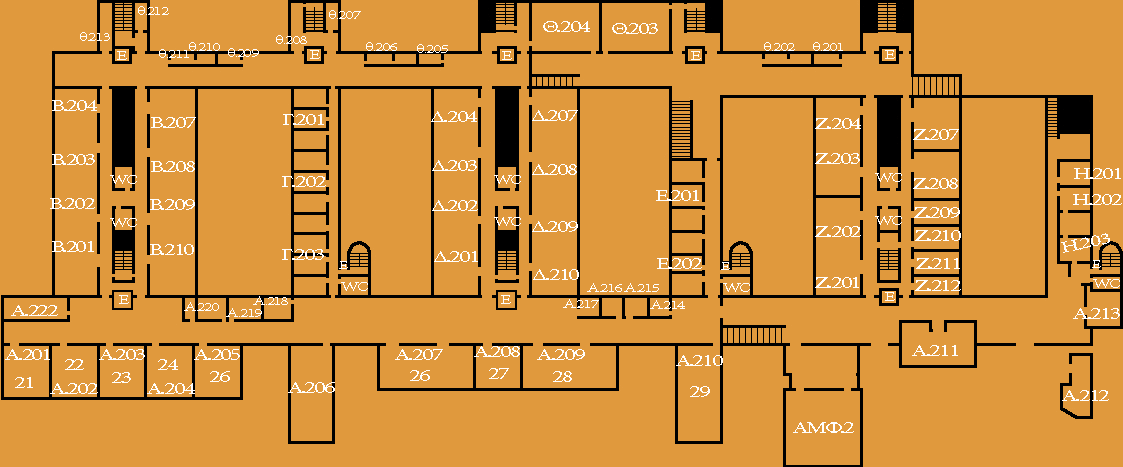
<style>
.page{position:relative;width:1123px;height:467px;background:#e0993d}
.page>*{position:absolute;margin:0}
.t1{font:12.9px "MinionPro-Regular";letter-spacing:-0.08em;color:#ffffff;scale:1.45 1}
.t2{font:16.6px "MinionPro-Regular";letter-spacing:-0.08em;color:#ffffff;scale:1.45 1}
.t3{font:11px "MinionPro-Regular";letter-spacing:-0.08em;color:#ffffff;scale:1.45 1}
</style>
<div class="page">
<p class="t1" style="left:138px;top:6px;width:31px;height:9px">θ.212</p>
<p class="t1" style="left:329px;top:10px;width:32px;height:9px">θ.207</p>
<p class="t2" style="left:543px;top:21px;width:47px;height:11px">Θ.204</p>
<p class="t2" style="left:612px;top:23px;width:46px;height:11px">Θ.203</p>
<p class="t1" style="left:80px;top:32px;width:30px;height:9px">θ.213</p>
<p class="t1" style="left:276px;top:35px;width:31px;height:9px">θ.208</p>
<p class="t1" style="left:117px;top:51px;width:10px;height:9px">Ε</p>
<p class="t1" style="left:159px;top:49px;width:30px;height:9px">θ.211</p>
<p class="t1" style="left:189px;top:42px;width:31px;height:9px">θ.210</p>
<p class="t1" style="left:228px;top:48px;width:31px;height:9px">θ.209</p>
<p class="t1" style="left:310px;top:50px;width:10px;height:9px">Ε</p>
<p class="t1" style="left:366px;top:42px;width:31px;height:9px">θ.206</p>
<p class="t1" style="left:417px;top:44px;width:31px;height:9px">θ.205</p>
<p class="t1" style="left:502px;top:51px;width:10px;height:9px">Ε</p>
<p class="t1" style="left:691px;top:51px;width:10px;height:9px">Ε</p>
<p class="t1" style="left:764px;top:42px;width:31px;height:9px">θ.202</p>
<p class="t1" style="left:813px;top:42px;width:30px;height:9px">θ.201</p>
<p class="t1" style="left:885px;top:50px;width:10px;height:9px">Ε</p>
<p class="t2" style="left:52px;top:100px;width:45px;height:11px">Β.204</p>
<p class="t2" style="left:431px;top:111px;width:46px;height:11px">Δ.204</p>
<p class="t2" style="left:532px;top:110px;width:46px;height:11px">Δ.207</p>
<p class="t2" style="left:151px;top:117px;width:45px;height:11px">Β.207</p>
<p class="t2" style="left:283px;top:114px;width:41px;height:11px">Γ.201</p>
<p class="t2" style="left:815px;top:118px;width:46px;height:11px">Ζ.204</p>
<p class="t2" style="left:913px;top:129px;width:46px;height:11px">Ζ.207</p>
<p class="t2" style="left:52px;top:154px;width:43px;height:11px">Β.203</p>
<p class="t2" style="left:151px;top:161px;width:44px;height:11px">Β.208</p>
<p class="t2" style="left:432px;top:160px;width:45px;height:11px">Δ.203</p>
<p class="t2" style="left:815px;top:153px;width:45px;height:11px">Ζ.203</p>
<p class="t2" style="left:532px;top:164px;width:45px;height:11px">Δ.208</p>
<p class="t1" style="left:875px;top:173px;width:27px;height:9px">WC</p>
<p class="t2" style="left:1074px;top:168px;width:47px;height:11px">Η.201</p>
<p class="t1" style="left:110px;top:175px;width:27px;height:9px">WC</p>
<p class="t2" style="left:282px;top:176px;width:44px;height:11px">Γ.202</p>
<p class="t1" style="left:494px;top:175px;width:27px;height:9px">WC</p>
<p class="t2" style="left:913px;top:178px;width:45px;height:11px">Ζ.208</p>
<p class="t2" style="left:50px;top:198px;width:45px;height:11px">Β.202</p>
<p class="t2" style="left:656px;top:190px;width:43px;height:11px">Ε.201</p>
<p class="t2" style="left:1073px;top:194px;width:49px;height:11px">Η.202</p>
<p class="t2" style="left:150px;top:199px;width:45px;height:11px">Β.209</p>
<p class="t2" style="left:432px;top:200px;width:46px;height:11px">Δ.202</p>
<p class="t2" style="left:914px;top:207px;width:46px;height:11px">Ζ.209</p>
<p class="t1" style="left:110px;top:218px;width:27px;height:9px">WC</p>
<p class="t1" style="left:494px;top:217px;width:27px;height:9px">WC</p>
<p class="t2" style="left:532px;top:221px;width:46px;height:11px">Δ.209</p>
<p class="t1" style="left:875px;top:216px;width:27px;height:9px">WC</p>
<p class="t2" style="left:815px;top:226px;width:46px;height:11px">Ζ.202</p>
<p class="t2" style="left:915px;top:230px;width:46px;height:11px">Ζ.210</p>
<p class="t2" style="left:1061px;top:233px;width:49px;height:20px;rotate:-12deg">Η.203</p>
<p class="t2" style="left:52px;top:241px;width:42px;height:11px">Β.201</p>
<p class="t2" style="left:150px;top:244px;width:44px;height:11px">Β.210</p>
<p class="t2" style="left:282px;top:249px;width:42px;height:11px">Γ.203</p>
<p class="t2" style="left:434px;top:251px;width:44px;height:11px">Δ.201</p>
<p class="t3" style="left:339px;top:261px;width:9px;height:8px">Ε</p>
<p class="t2" style="left:533px;top:269px;width:46px;height:11px">Δ.210</p>
<p class="t2" style="left:657px;top:258px;width:45px;height:11px">Ε.202</p>
<p class="t3" style="left:721px;top:262px;width:9px;height:8px">Ε</p>
<p class="t2" style="left:916px;top:258px;width:44px;height:11px">Ζ.211</p>
<p class="t3" style="left:1092px;top:260px;width:9px;height:8px">Ε</p>
<p class="t2" style="left:815px;top:277px;width:44px;height:11px">Ζ.201</p>
<p class="t2" style="left:915px;top:280px;width:46px;height:11px">Ζ.212</p>
<p class="t1" style="left:1093px;top:279px;width:27px;height:9px">WC</p>
<p class="t1" style="left:341px;top:282px;width:27px;height:9px">WC</p>
<p class="t1" style="left:587px;top:283px;width:35px;height:9px">Α.216</p>
<p class="t1" style="left:624px;top:283px;width:35px;height:9px">Α.215</p>
<p class="t1" style="left:723px;top:283px;width:27px;height:9px">WC</p>
<p class="t1" style="left:885px;top:292px;width:10px;height:9px">Ε</p>
<p class="t2" style="left:11px;top:305px;width:47px;height:11px">Α.222</p>
<p class="t1" style="left:119px;top:295px;width:10px;height:9px">Ε</p>
<p class="t1" style="left:184px;top:302px;width:35px;height:9px">Α.220</p>
<p class="t1" style="left:253px;top:296px;width:35px;height:9px">Α.218</p>
<p class="t1" style="left:501px;top:295px;width:10px;height:9px">Ε</p>
<p class="t1" style="left:563px;top:299px;width:36px;height:9px">Α.217</p>
<p class="t1" style="left:650px;top:300px;width:35px;height:9px">Α.214</p>
<p class="t1" style="left:226px;top:308px;width:36px;height:9px">Α.219</p>
<p class="t2" style="left:1073px;top:308px;width:47px;height:11px">Α.213</p>
<p class="t2" style="left:5px;top:349px;width:45px;height:11px">Α.201</p>
<p class="t2" style="left:99px;top:349px;width:46px;height:11px">Α.203</p>
<p class="t2" style="left:194px;top:349px;width:46px;height:11px">Α.205</p>
<p class="t2" style="left:395px;top:349px;width:48px;height:11px">Α.207</p>
<p class="t2" style="left:474px;top:346px;width:46px;height:11px">Α.208</p>
<p class="t2" style="left:537px;top:349px;width:48px;height:11px">Α.209</p>
<p class="t2" style="left:912px;top:345px;width:46px;height:11px">Α.211</p>
<p class="t2" style="left:65px;top:359px;width:19px;height:11px">22</p>
<p class="t2" style="left:158px;top:359px;width:20px;height:11px">24</p>
<p class="t2" style="left:676px;top:355px;width:47px;height:11px">Α.210</p>
<p class="t2" style="left:15px;top:377px;width:18px;height:11px">21</p>
<p class="t2" style="left:112px;top:372px;width:19px;height:11px">23</p>
<p class="t2" style="left:210px;top:371px;width:20px;height:11px">26</p>
<p class="t2" style="left:410px;top:370px;width:20px;height:11px">26</p>
<p class="t2" style="left:489px;top:368px;width:20px;height:11px">27</p>
<p class="t2" style="left:553px;top:371px;width:19px;height:11px">28</p>
<p class="t2" style="left:50px;top:383px;width:48px;height:11px">Α.202</p>
<p class="t2" style="left:147px;top:383px;width:48px;height:11px">Α.204</p>
<p class="t2" style="left:288px;top:382px;width:47px;height:11px">Α.206</p>
<p class="t2" style="left:690px;top:386px;width:20px;height:11px">29</p>
<p class="t2" style="left:1062px;top:390px;width:47px;height:11px">Α.212</p>
<p class="t2" style="left:793px;top:422px;width:61px;height:11px">ΑΜΦ.2</p>
</div>
